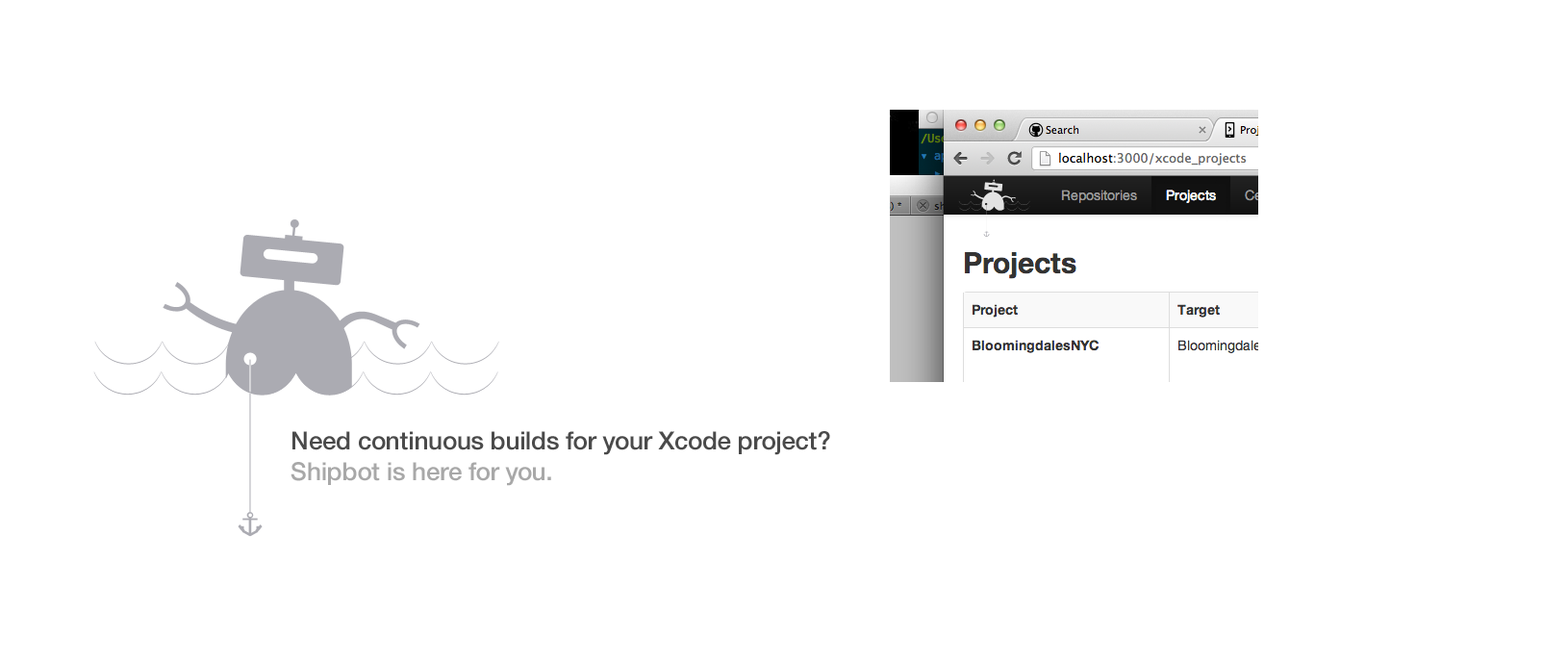
<style>
.page{position:relative;width:1568px;height:664px;background:#ffffff}
.page>*{position:absolute;margin:0}
.t1{font:25px "HelveticaNeue-Medium";color:#4a4a4a}
.t2{font:25px "HelveticaNeue-Medium";color:#a8a8a8}
</style>
<div class="page">
<p class="t1" style="left:291px;top:431px;width:539px;height:55px">Need continuous builds for your Xcode project?<br><span class="t2">Shipbot is here for you.</span></p>
</div>
